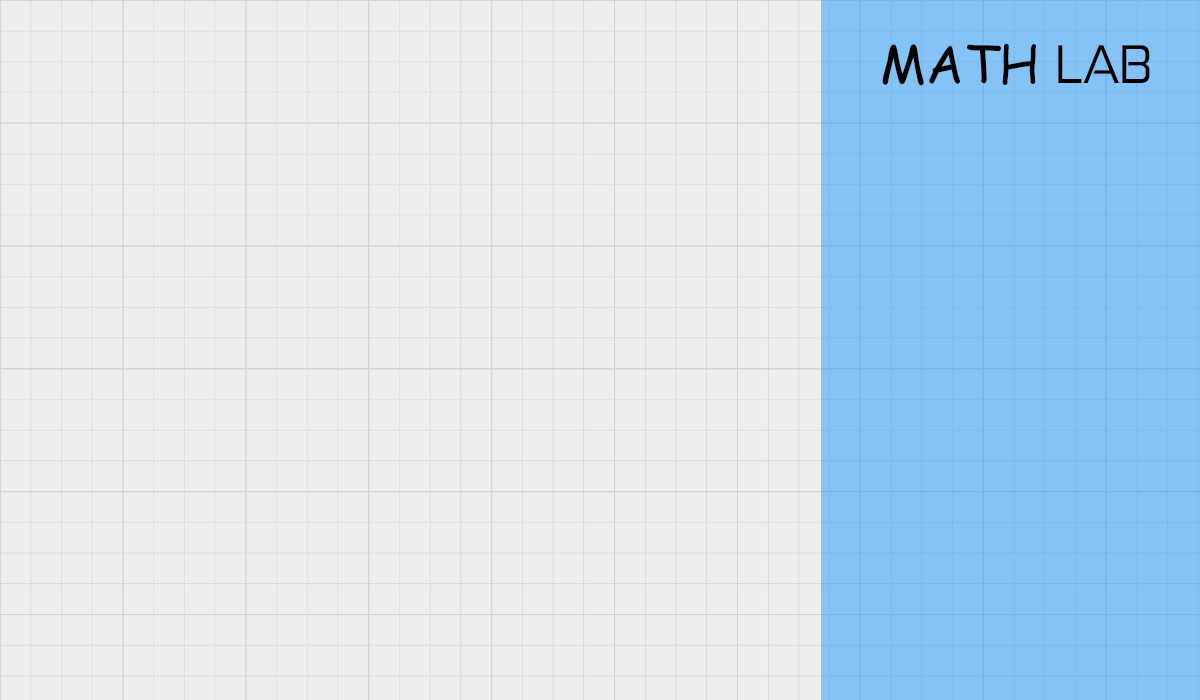
<style>
.page{position:relative;width:1200px;height:700px;background:#eeeeee}
.page>*{position:absolute;margin:0}
.t1{font:51.9px "ComicSansMS";color:#000000}
.t2{font:51.9px "ZektonRg-Regular";color:#000000}
</style>
<div class="page">
<p class="t1" style="left:882px;top:43px;width:268px;height:43px">MATH <span class="t2">LAB</span></p>
</div>
